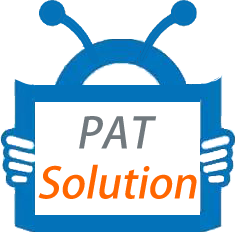
<style>
.page{position:relative;width:236px;height:236px;background:#ffffff}
.page>*{position:absolute;margin:0}
.t1{font:42px "AdobeHeitiStd-Regular";color:#71797e;font-style:italic}
.t2{font:42px "AdobeHeitiStd-Regular";color:#ff6600;font-style:italic}
</style>
<div class="page">
<p class="t1" style="left:79px;top:116px;width:78px;height:33px">PAT</p>
<p class="t2" style="left:38px;top:164px;width:159px;height:35px">Solution</p>
</div>
